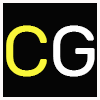
<style>
.page{position:relative;width:100px;height:100px;background:#050505}
.page>*{position:absolute;margin:0}
.t1{font:72px "Rubik-Regular";color:#f9f73a}
.t2{font:72px "Rubik-Regular";color:#fefefe}
</style>
<div class="page">
<p class="t1" style="left:6px;top:25px;width:41px;height:52px">C</p>
<p class="t2" style="left:53px;top:25px;width:42px;height:52px">G</p>
</div>
